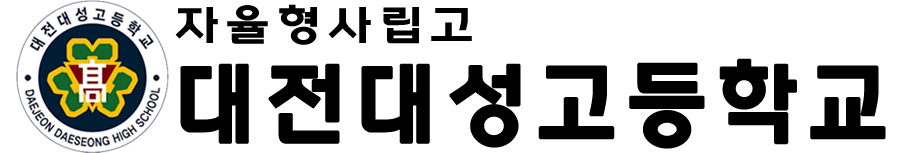
<style>
.page{position:relative;width:900px;height:153px;background:#ffffff}
.page>*{position:absolute;margin:0}
.t1{font:96.6px/55.6px "KorUB-Regular";letter-spacing:0.075em;color:#000000;font-weight:bold;scale:0.93 1}
.t2{font:44.6px/55.6px "KorUB-Regular";letter-spacing:0.12em;color:#000000;scale:1.12 1}
</style>
<div class="page">
<p class="t1" style="left:175px;top:4px;width:711px;height:145px"><span class="t2">자율형사립고<br></span>대전대성고등학교</p>
</div>
